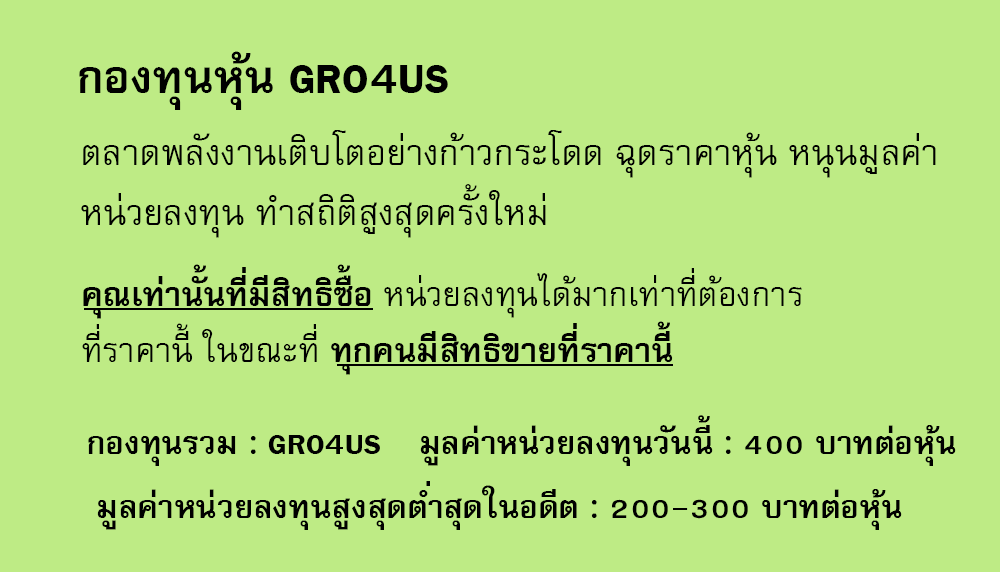
<style>
.page{position:relative;width:1000px;height:572px;background:#beeb85}
.page>*{position:absolute;margin:0}
.t1{font:64px "FreesiaUPCBold";color:#000000}
.t2{font:50px/60px "FreesiaUPC";color:#000000}
.t3{font:47px "FreesiaUPC";color:#000000}
.t4{font:47px "FreesiaUPCBold";color:#000000}
.t5{font:45px "FreesiaUPCBold";color:#000000}
</style>
<div class="page">
<p class="t1" style="left:79px;top:51px;width:369px;height:59px">กองทุนหุ้น GRO4US</p>
<p class="t2" style="left:81px;top:130px;width:855px;height:108px">ตลาดพลังงานเติบโตอย่างก้าวกระโดด ฉุดราคาหุ้น หนุนมูลค่า<br>หน่วยลงทุน ทำสถิติสูงสุดครั้งใหม่</p>
<p class="t3" style="left:82px;top:264px;width:720px;height:111px"><span class="t4">คุณเท่านั้นที่มีสิทธิซื้อ </span>หน่วยลงทุนได้มากเท่าที่ต้องการ<br>ที่ราคานี้ ในขณะที่<span class="t4"> ทุกคนมีสิทธิขายที่ราคานี้</span></p>
<p class="t5" style="left:420px;top:415px;width:536px;height:51px">มูลค่าหน่วยลงทุนวันนี้ : 400 บาทต่อหุ้น</p>
<p class="t5" style="left:88px;top:435px;width:292px;height:31px">กองทุนรวม : GRO4US</p>
<p class="t5" style="left:97px;top:481px;width:805px;height:49px">มูลค่าหน่วยลงทุนสูงสุดต่ำสุดในอดีต : 200-300 บาทต่อหุ้น</p>
</div>
